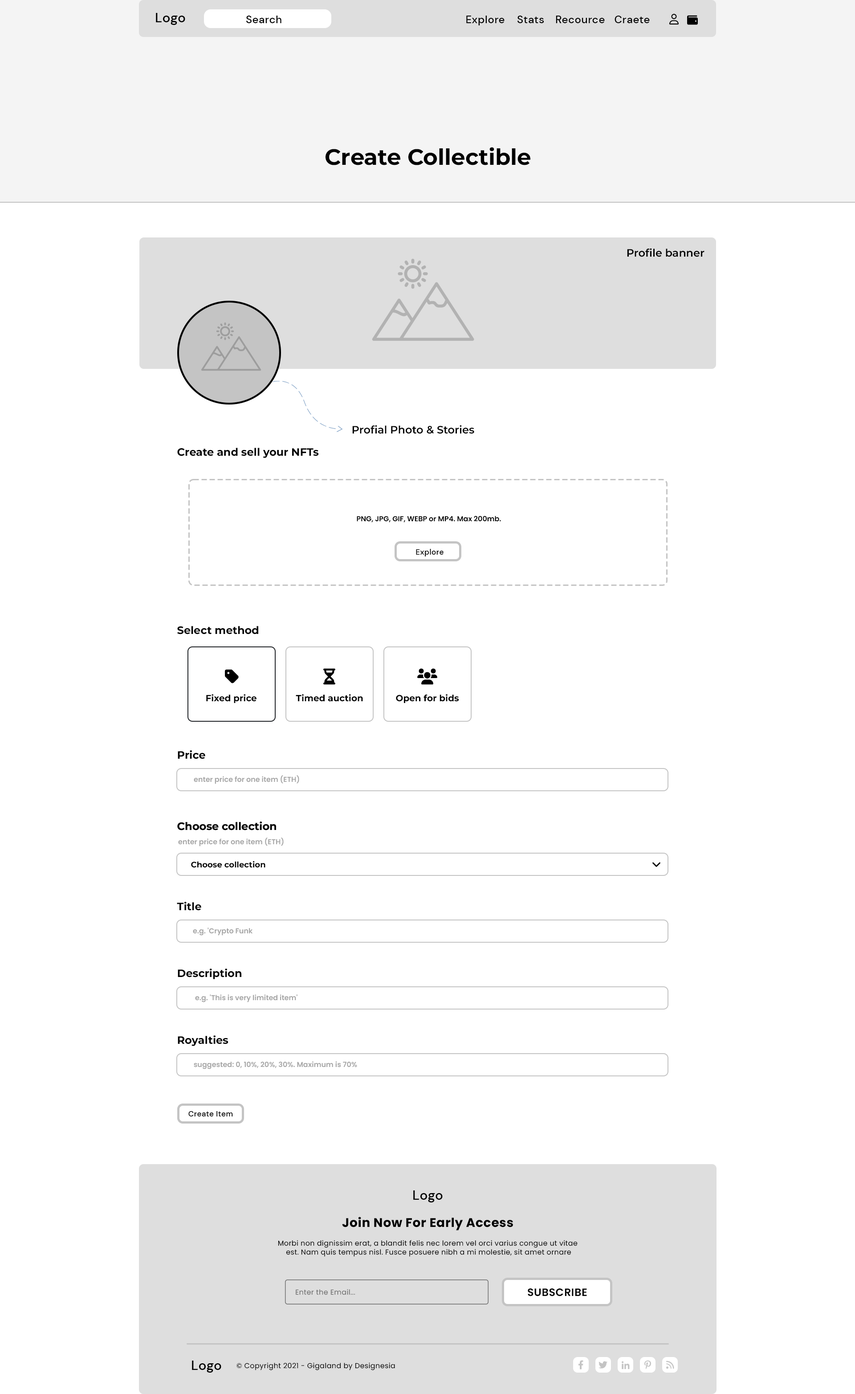
<style>
.page{position:relative;width:855px;height:1394px;background:#ffffff}
.page>*{position:absolute;margin:0}
.t1{font:13.4px "DMSans-Medium";letter-spacing:0.025em;color:#000000}
.t2{font:10.7px "DMSans-Medium";letter-spacing:0.025em;color:#000000}
.t3{font:22.3px "Montserrat-Bold";color:#000000}
.t4{font:10.7px "Montserrat-SemiBold";color:#000000}
.t5{font:10.7px "Montserrat-Bold";color:#000000}
.t6{font:7.1px "Poppins-SemiBold";color:#000000}
.t7{font:7.6px "DMSans-Medium";letter-spacing:0.025em;color:#000000}
.t8{font:8.9px "Montserrat-Bold";color:#000000}
.t9{font:7.1px "Poppins-SemiBold";color:#a5a5a5}
.t10{font:8px "Montserrat-Bold";color:#000000}
.t11{font:12.5px "Poppins-Bold";letter-spacing:0.025em;color:#000000}
.t12{font:7.1px "Poppins-Regular";letter-spacing:0.025em;color:#000000}
.t13{font:7.1px "Poppins-Regular";letter-spacing:0.025em;color:#6d6d6d}
.t14{font:10.7px "Poppins-SemiBold";letter-spacing:0.025em;color:#000000;text-transform:uppercase}
</style>
<div class="page">
<p class="t1" style="left:156px;top:13px;width:29px;height:12px">Logo</p>
<p class="t2" style="left:246px;top:16px;width:36px;height:7px">Search</p>
<p class="t2" style="left:466px;top:16px;width:39px;height:9px">Explore</p>
<p class="t2" style="left:518px;top:16px;width:26px;height:7px">Stats</p>
<p class="t2" style="left:556px;top:16px;width:49px;height:7px">Recource</p>
<p class="t2" style="left:615px;top:16px;width:35px;height:7px">Craete</p>
<p class="t3" style="left:326px;top:147px;width:205px;height:18px">Create Collectible</p>
<p class="t4" style="left:627px;top:248px;width:78px;height:9px">Profile banner</p>
<p class="t4" style="left:352px;top:425px;width:122px;height:9px">Profial Photo &amp; Stories</p>
<p class="t5" style="left:177px;top:448px;width:142px;height:10px">Create and sell your NFTs</p>
<p class="t6" style="left:357px;top:516px;width:144px;height:7px">PNG, JPG, GIF, WEBP or MP4. Max 200mb.</p>
<p class="t7" style="left:416px;top:549px;width:28px;height:7px">Explore</p>
<p class="t5" style="left:177px;top:626px;width:81px;height:8px">Select method</p>
<p class="t8" style="left:206px;top:694px;width:51px;height:9px">Fixed price</p>
<p class="t8" style="left:296px;top:694px;width:67px;height:8px">Timed auction</p>
<p class="t8" style="left:396px;top:694px;width:63px;height:9px">Open for bids</p>
<p class="t5" style="left:178px;top:750px;width:27px;height:9px">Price</p>
<p class="t9" style="left:194px;top:775px;width:105px;height:9px">enter price for one item (ETH)</p>
<p class="t5" style="left:177px;top:822px;width:99px;height:8px">Choose collection</p>
<p class="t5" style="left:177px;top:822px;width:99px;height:8px">Choose collection</p>
<p class="t9" style="left:178px;top:838px;width:106px;height:8px">enter price for one item (ETH)</p>
<p class="t10" style="left:191px;top:861px;width:75px;height:7px">Choose collection</p>
<p class="t5" style="left:177px;top:902px;width:24px;height:9px">Title</p>
<p class="t9" style="left:193px;top:928px;width:60px;height:8px">e.g. 'Crypto Funk</p>
<p class="t5" style="left:178px;top:969px;width:63px;height:10px">Description</p>
<p class="t9" style="left:195px;top:994px;width:103px;height:8px">e.g. 'This is very limited item'</p>
<p class="t5" style="left:178px;top:1035px;width:51px;height:11px">Royalties</p>
<p class="t9" style="left:194px;top:1061px;width:163px;height:8px">suggested: 0, 10%, 20%, 30%. Maximum is 70%</p>
<p class="t7" style="left:188px;top:1111px;width:45px;height:5px">Create Item</p>
<p class="t1" style="left:413px;top:1190px;width:30px;height:12px">Logo</p>
<p class="t11" style="left:342px;top:1217px;width:171px;height:14px">Join Now For Early Access</p>
<p class="t12" style="left:278px;top:1240px;width:300px;height:17px;text-align:center">Morbi non dignissim erat, a blandit felis nec lorem vel orci varius congue ut vitae <br>est. Nam quis tempus nisl. Fusce posuere nibh a mi molestie, sit amet ornare</p>
<p class="t13" style="left:296px;top:1289px;width:60px;height:6px">Enter the Email...</p>
<p class="t14" style="left:528px;top:1288px;width:59px;height:8px">Subscribe</p>
<p class="t1" style="left:192px;top:1361px;width:29px;height:12px">Logo</p>
<p class="t12" style="left:237px;top:1362px;width:158px;height:8px">© Copyright 2021 - Gigaland by Designesia</p>
</div>
